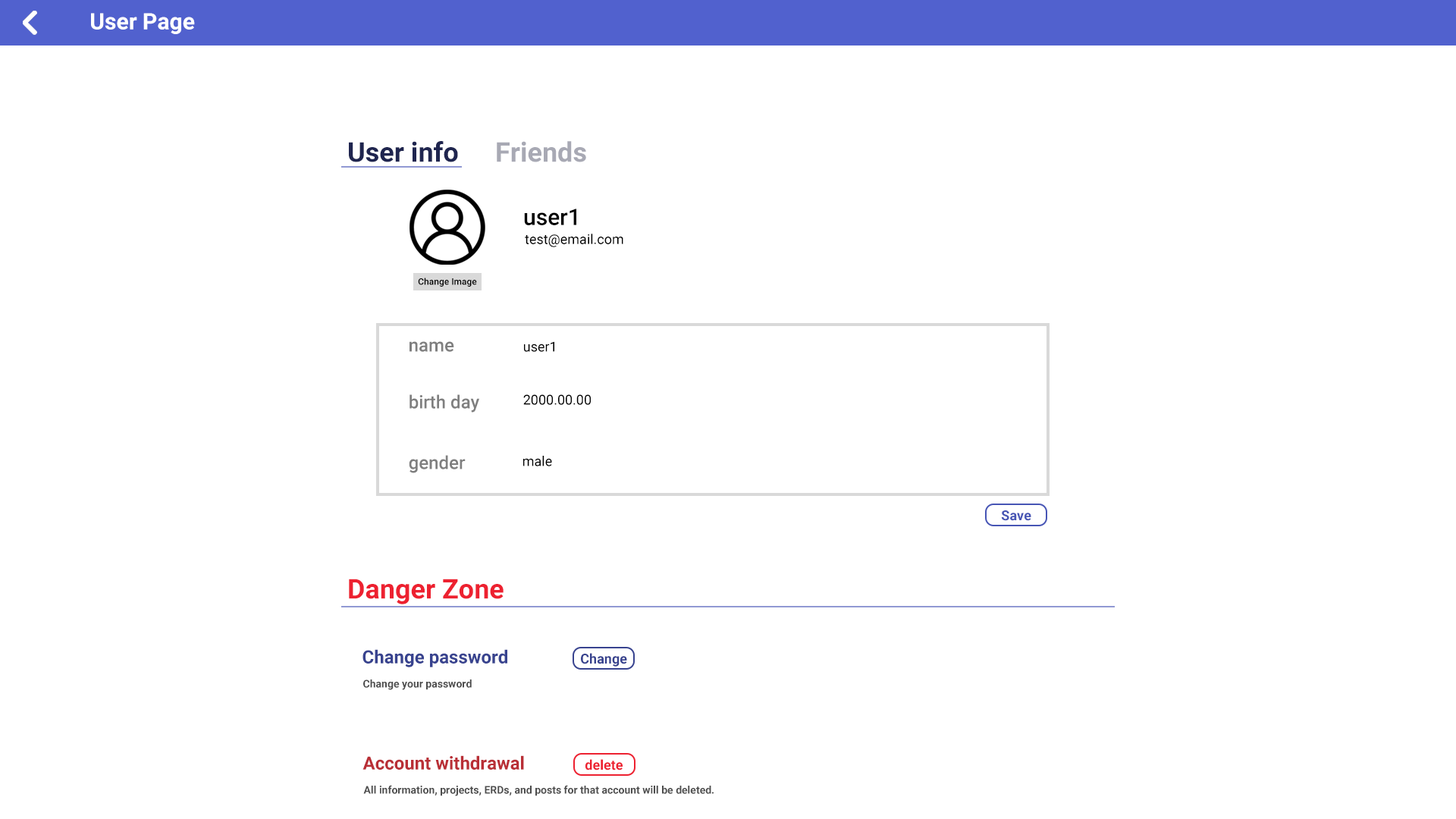
<style>
.page{position:relative;width:1456px;height:819px;background:#ffffff}
.page>*{position:absolute;margin:0}
.t1{font:22.7px "Roboto-Bold";color:#ffffff}
.t2{font:27.3px "Roboto-Bold";color:#1f254f}
.t3{font:27.3px "Roboto-Bold";color:#a8a9b4}
.t4{font:22.7px "Roboto-Medium";color:#000000}
.t5{font:13.6px "Roboto-Regular";color:#000000}
.t6{font:9.1px "Roboto-Medium";color:#000000}
.t7{font:18.2px "Roboto-Medium";color:#7f7f7f}
.t8{font:13.6px "Roboto-Bold";color:#4755b5}
.t9{font:27.3px "Roboto-Bold";color:#ed2130}
.t10{font:18.2px "Roboto-Bold";color:#38438f}
.t11{font:13.6px "Roboto-Bold";color:#38438f}
.t12{font:10.6px "Roboto-Bold";color:#4d4d4d}
.t13{font:18.2px "Roboto-Bold";color:#b92f36}
.t14{font:13.6px "Roboto-Bold";color:#ed2130}
</style>
<div class="page">
<p class="t1" style="left:91px;top:13px;width:104px;height:21px">User Page</p>
<p class="t2" style="left:349px;top:141px;width:109px;height:21px">User info</p>
<p class="t3" style="left:497px;top:141px;width:89px;height:21px">Friends</p>
<p class="t4" style="left:524px;top:209px;width:52px;height:16px">user1</p>
<p class="t5" style="left:525px;top:234px;width:98px;height:13px">test@email.com</p>
<p class="t6" style="left:418px;top:278px;width:59px;height:9px">Change Image</p>
<p class="t7" style="left:409px;top:341px;width:45px;height:11px">name</p>
<p class="t5" style="left:524px;top:341px;width:30px;height:11px">user1</p>
<p class="t7" style="left:409px;top:394px;width:70px;height:19px">birth day</p>
<p class="t5" style="left:523px;top:394px;width:68px;height:11px">2000.00.00</p>
<p class="t7" style="left:409px;top:455px;width:57px;height:18px">gender</p>
<p class="t5" style="left:523px;top:456px;width:29px;height:10px">male</p>
<p class="t8" style="left:1001px;top:510px;width:30px;height:11px">Save</p>
<p class="t9" style="left:349px;top:579px;width:155px;height:25px">Danger Zone</p>
<p class="t10" style="left:362px;top:649px;width:145px;height:18px">Change password</p>
<p class="t11" style="left:581px;top:653px;width:46px;height:14px">Change</p>
<p class="t12" style="left:363px;top:679px;width:109px;height:11px">Change your password</p>
<p class="t13" style="left:362px;top:755px;width:162px;height:15px">Account withdrawal</p>
<p class="t14" style="left:585px;top:759px;width:38px;height:11px">delete</p>
<p class="t12" style="left:363px;top:785px;width:351px;height:11px">All information, projects, ERDs, and posts for that account will be deleted.</p>
</div>
